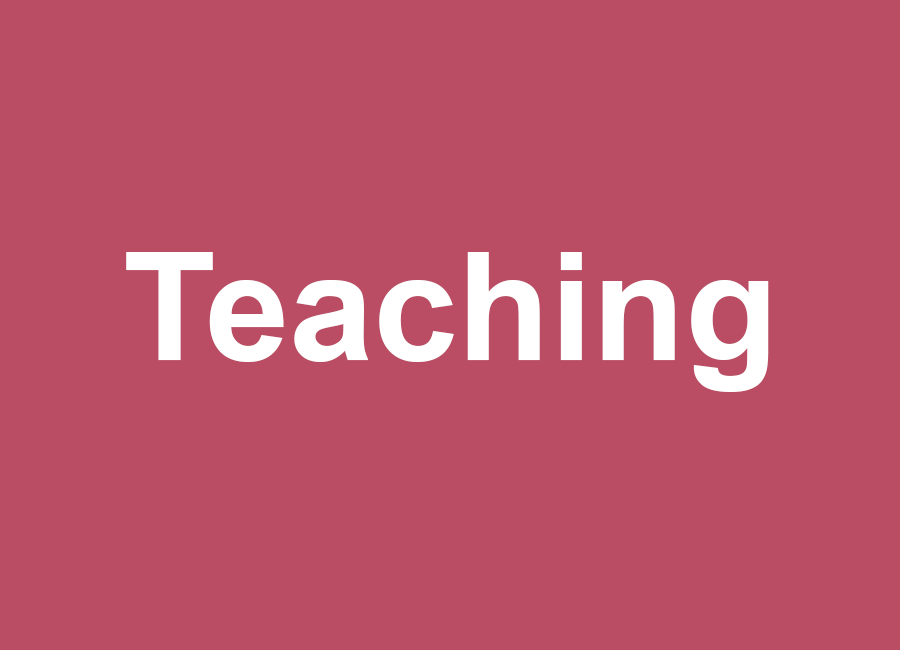
<style>
.page{position:relative;width:900px;height:650px;background:#ba4c63}
.page>*{position:absolute;margin:0}
.t1{font:150px "Arial-BoldMT";color:#ffffff}
</style>
<div class="page">
<p class="t1" style="left:126px;top:252px;width:643px;height:140px">Teaching</p>
</div>
